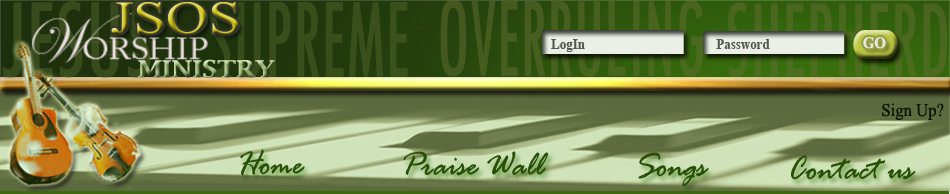
<style>
.page{position:relative;width:950px;height:194px}
.page>*{position:absolute;margin:0}
.t1{font:45.7px "TimesNewRomanPSMT";scale:1.29 1}
.t2{font:14px "TimesNewRomanPS-BoldMT";color:#545653;scale:0.93 1}
.t3{font:16px "TimesNewRomanPS-BoldMT";color:#e5ebe1;scale:0.93 1}
.t4{font:23.4px "LucidaBright-Demi";scale:1.15 1}
.t5{font:18px "TimesNewRomanPSMT";color:#0a1204;scale:0.93 1}
.t6{font:36px "RageItalic";color:#275006;scale:0.93 1}
</style>
<div class="page">
<p class="t1" style="left:111px;top:2px;width:128px;height:32px">JSOS</p>
<p class="t2" style="left:551px;top:39px;width:34px;height:13px">LogIn</p>
<p class="t2" style="left:716px;top:39px;width:54px;height:10px">Password</p>
<p class="t3" style="left:863px;top:37px;width:23px;height:12px">GO</p>
<p class="t4" style="left:138px;top:59px;width:137px;height:19px">MINISTRY</p>
<p class="t5" style="left:882px;top:103px;width:62px;height:17px">Sign Up?</p>
<p class="t6" style="left:240px;top:149px;width:65px;height:27px">Home</p>
<p class="t6" style="left:403px;top:151px;width:146px;height:25px">Praise Wall</p>
<p class="t6" style="left:638px;top:152px;width:71px;height:35px">Songs</p>
<p class="t6" style="left:791px;top:155px;width:125px;height:25px">Contact us</p>
</div>
